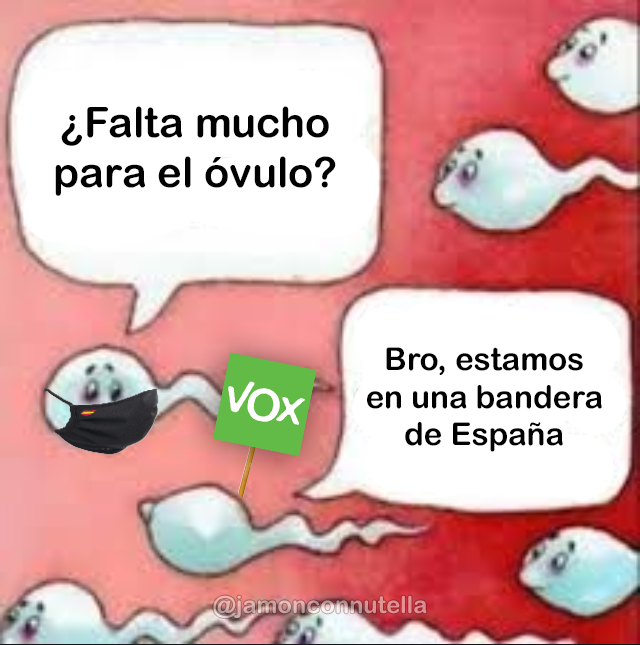
<style>
.page{position:relative;width:640px;height:645px;background:#ffffff}
.page>*{position:absolute;margin:0}
.t1{font:41.8px "ArialRoundedMTBold";color:#000000}
.t2{font:31.5px "ArialRoundedMTBold";color:#000000}
.t3{font:23.8px "ArialRoundedMTBold"}
</style>
<div class="page">
<p class="t1" style="left:55px;top:106px;width:281px;height:90px;text-align:center">¿Falta mucho<br>para el óvulo?</p>
<p class="t2" style="left:367px;top:347px;width:235px;height:105px;text-align:center">Bro, estamos<br>en una bandera<br>de España</p>
<p class="t3" style="left:213px;top:595px;width:214px;height:23px">@jamonconnutella</p>
</div>
